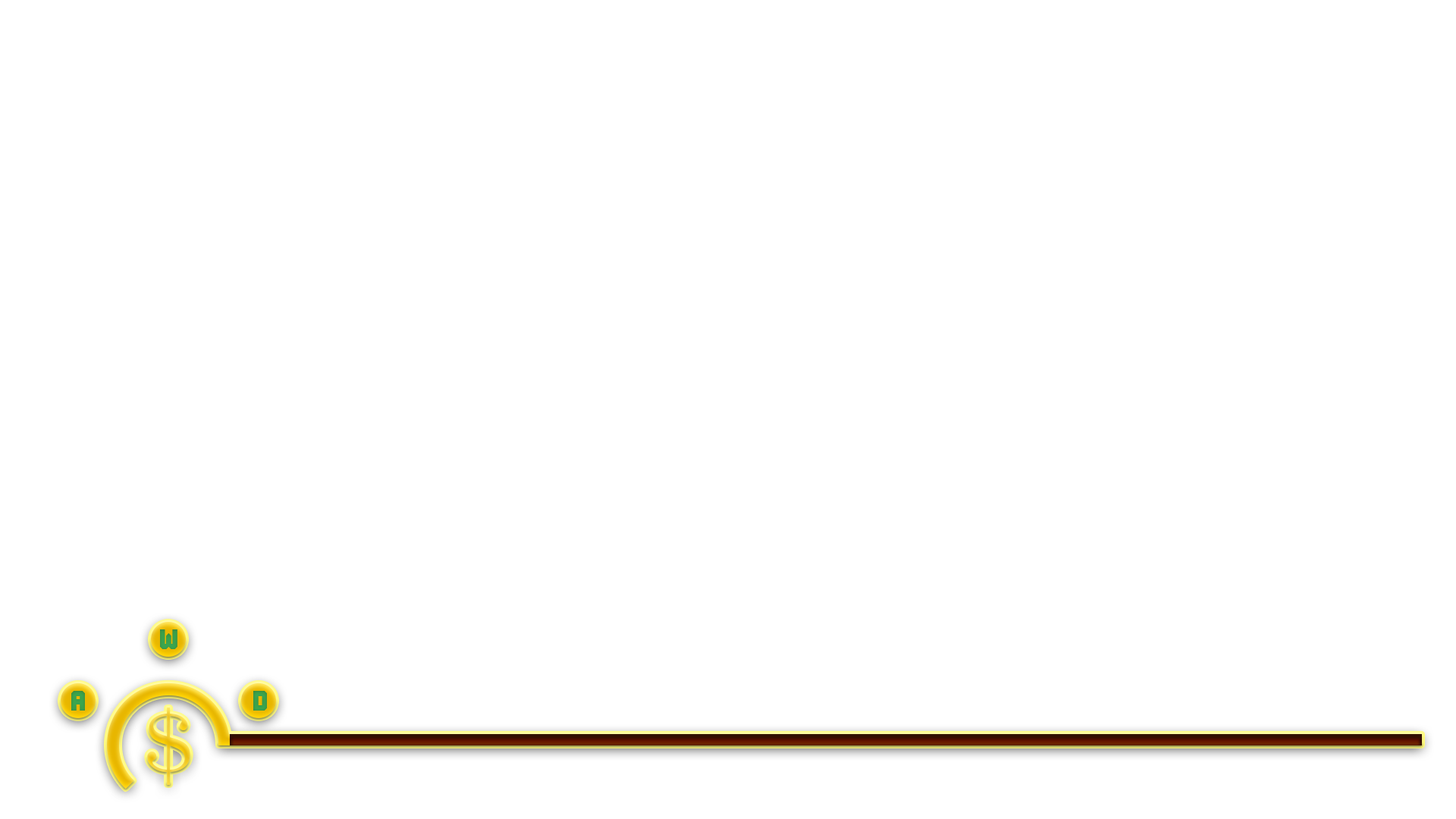
<style>
.page{position:relative;width:1456px;height:819px;background:#ffffff}
.page>*{position:absolute;margin:0}
.t1{font:27.3px "BNMachine";color:#39a04c}
.t2{font:27.3px "BNMachine";color:#39a14c}
.t3{font:27.3px "BNMachine";color:#399f4c}
.t4{font:106.2px "BellMT"}
</style>
<div class="page">
<p class="t1" style="left:160px;top:629px;width:17px;height:20px">W</p>
<p class="t2" style="left:71px;top:691px;width:14px;height:20px">A</p>
<p class="t3" style="left:253px;top:691px;width:14px;height:20px">D</p>
<p class="t4" style="left:147px;top:708px;width:43px;height:77px">$</p>
</div>
